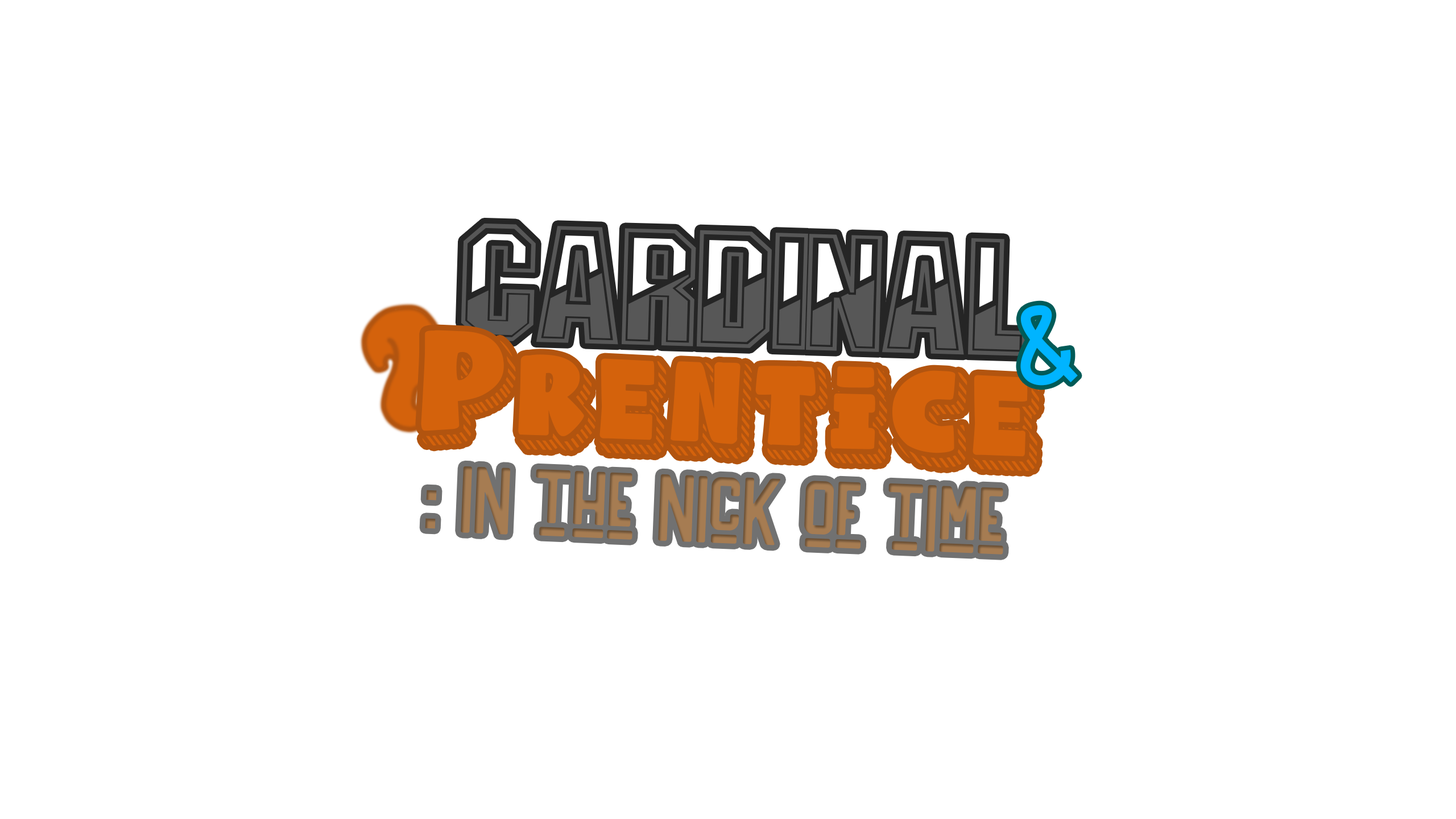
<style>
.page{position:relative;width:1456px;height:819px;background:#ffffff}
.page>*{position:absolute;margin:0}
.t1{font:107px "HANDLERRegular";color:#00b4ff}
.t2{font:151px "NaughtySquirrelShadowedDemo";color:#d4620c;scale:0.83 1}
.t3{font:94.8px "HANDLERRegular";color:#a67c52}
</style>
<div class="page">
<p class="t1" style="left:1020px;top:305px;width:58px;height:81px;rotate:-8deg">&amp;</p>
<p class="t2" style="left:421px;top:330px;width:619px;height:141px;rotate:3deg">Prentice</p>
<p class="t3" style="left:425px;top:466px;width:578px;height:89px;rotate:2deg">: in the nick of time</p>
</div>
